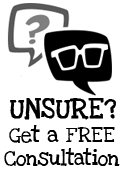
<style>
.page{position:relative;width:124px;height:172px;background:#ffffff}
.page>*{position:absolute;margin:0}
.t1{font:21px "LoveYaLikeASisterSolid";color:#000000;font-weight:bold}
.t2{font:16px/23px "LoveYaLikeASisterSolid";letter-spacing:-0.02em;color:#000000;scale:0.95 1}
.t3{font:16px/23px "LoveYaLikeASisterSolid";color:#000000}
</style>
<div class="page">
<p class="t1" style="left:10px;top:98px;width:106px;height:22px">UNSURE?</p>
<p class="t2" style="left:4px;top:125px;width:116px;height:41px;text-align:center"><span class="t3">Get a FREE<br></span>Consultation</p>
</div>
